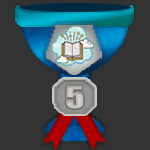
<style>
.page{position:relative;width:150px;height:150px;background:#333333}
.page>*{position:absolute;margin:0}
.t1{font:28.2px "Impact";color:#c3c1bc;scale:1.29 1}
</style>
<div class="page">
<p class="t1" style="left:66px;top:85px;width:18px;height:24px">5</p>
</div>
